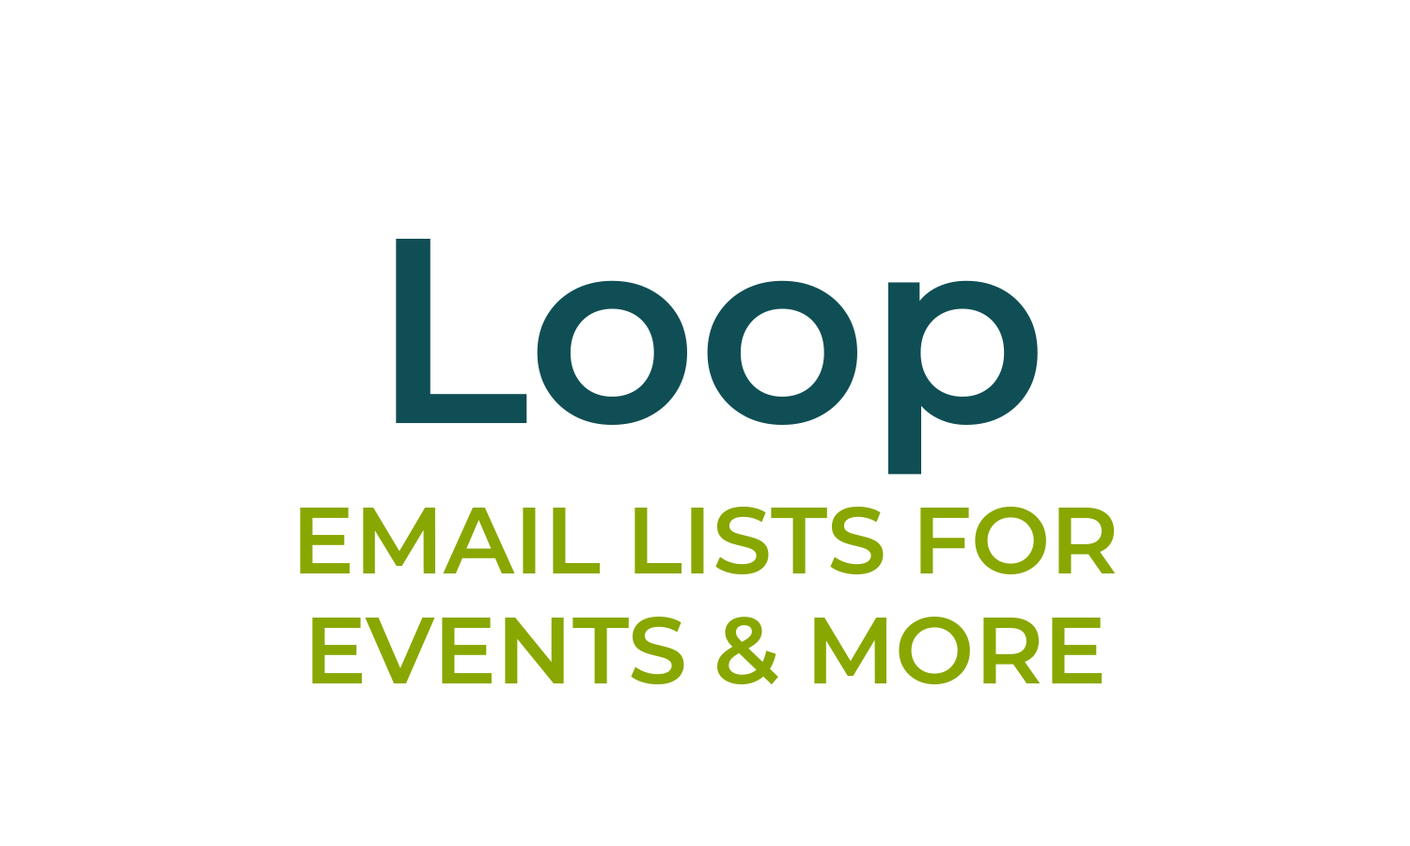
<style>
.page{position:relative;width:1410px;height:846px;background:#ffffff}
.page>*{position:absolute;margin:0}
.t1{font:263.1px "Montserrat-SemiBold";color:#0f4e54}
.t2{font:94px/0.2px "Montserrat-SemiBold";color:#88a700;text-transform:uppercase}
</style>
<div class="page">
<p class="t1" style="left:396px;top:239px;width:642px;height:236px">Loop</p>
<p class="t2" style="left:300px;top:507px;width:816px;height:178px;text-align:center">Email LISTS FOR<br>Events &amp; more</p>
</div>
